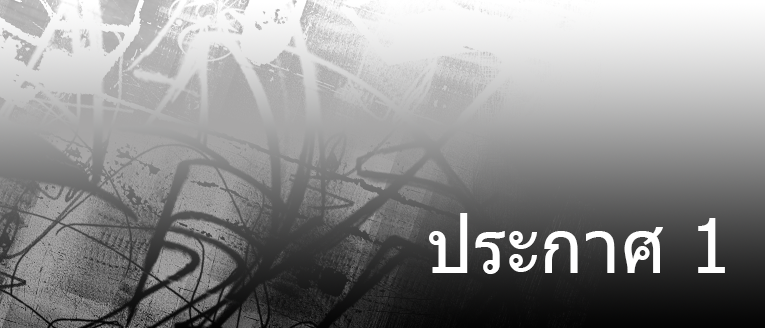
<style>
.page{position:relative;width:765px;height:328px}
.page>*{position:absolute;margin:0}
.t1{font:75px "Tahoma";color:#ffffff}
</style>
<div class="page">
<p class="t1" style="left:429px;top:213px;width:296px;height:61px">ประกาศ 1</p>
</div>
